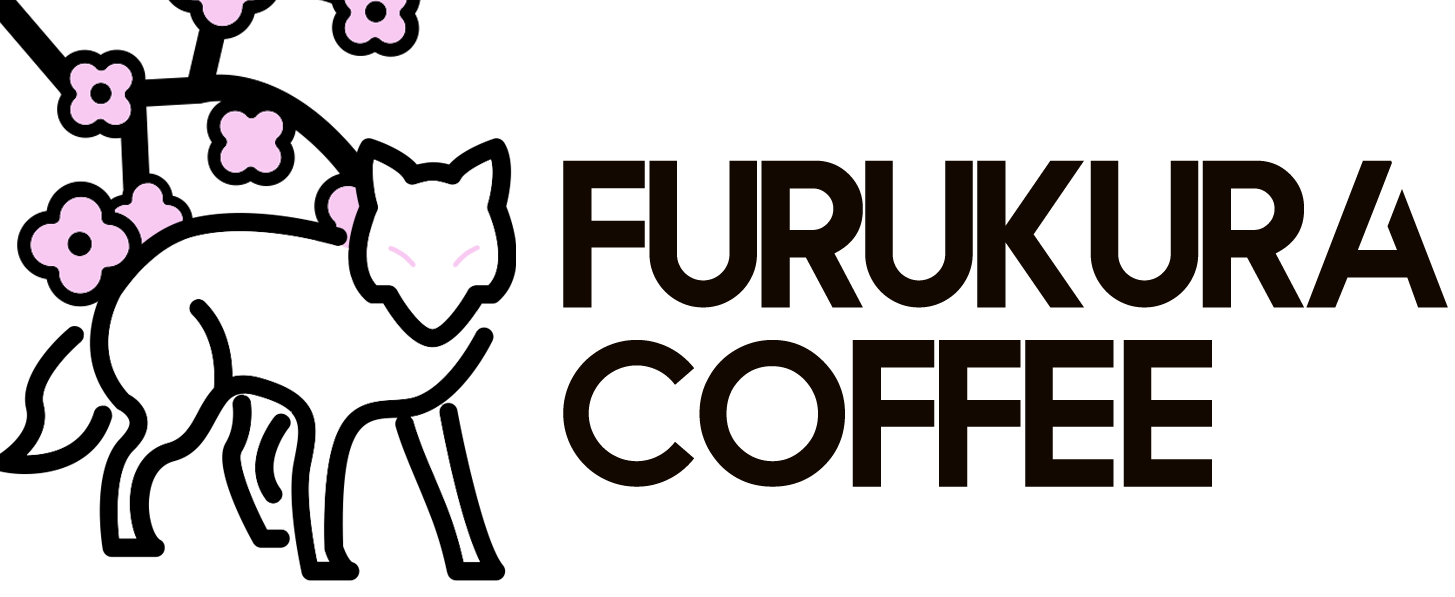
<style>
.page{position:relative;width:1455px;height:597px;background:#ffffff}
.page>*{position:absolute;margin:0}
.t1{font:209.2px/179.2px "Qualy-Bold";letter-spacing:-0.05em;color:#120800}
</style>
<div class="page">
<p class="t1" style="left:563px;top:160px;width:885px;height:327px">FURUKURA<br>COFFEe</p>
</div>
